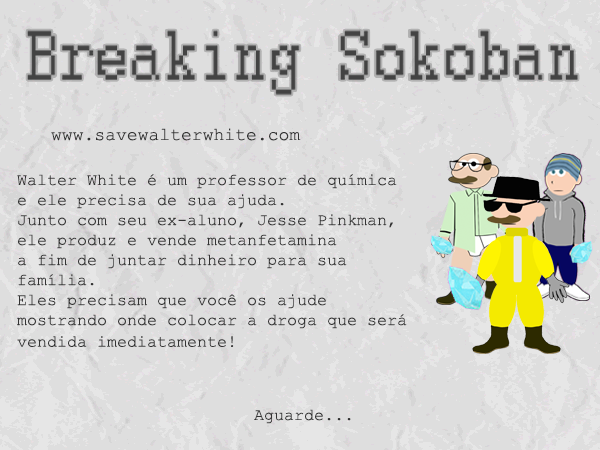
<style>
.page{position:relative;width:600px;height:450px;background:#dedede}
.page>*{position:absolute;margin:0}
.t1{font:18.1px "CourierNewPSMT";color:#333333}
.t2{font:16.7px "CourierNewPSMT";color:#333333}
</style>
<div class="page">
<p class="t1" style="left:51px;top:128px;width:250px;height:13px">www.savewalterwhite.com</p>
<p class="t2" style="left:17px;top:174px;width:390px;height:173px">Walter White é um professor de química <br>e ele precisa de sua ajuda. <br>Junto com seu ex-aluno, Jesse Pinkman, <br>ele produz e vende metanfetamina <br>a fim de juntar dinheiro para sua <br>família. <br>Eles precisam que você os ajude<br>mostrando onde colocar a droga que será<br>vendida imediatamente!</p>
<p class="t2" style="left:254px;top:409px;width:97px;height:15px">Aguarde...</p>
</div>
